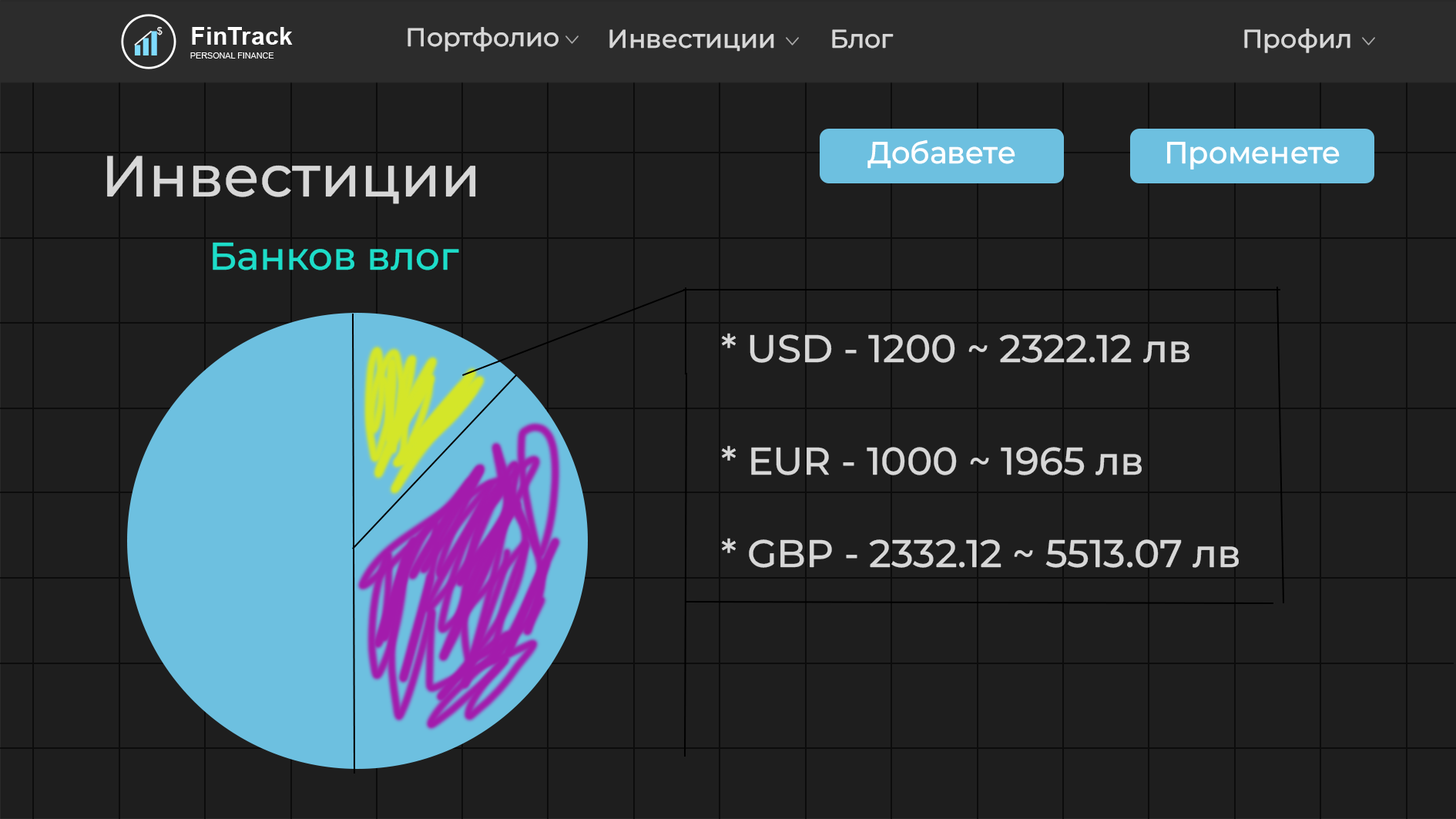
<style>
.page{position:relative;width:1456px;height:819px;background:#1e1e1e}
.page>*{position:absolute;margin:0}
.t1{font:25.7px "MontserratRoman-Medium";color:#d7d7d7}
.t2{font:30.6px "MontserratRoman-Medium";color:#ffffff;scale:0.97 1}
.t3{font:57.8px "MontserratRoman-Medium";color:#d7d7d7}
.t4{font:38.5px "MontserratRoman-Medium";color:#1dddc9}
.t5{font:38.5px "MontserratRoman-Medium";color:#d7d7d7}
</style>
<div class="page">
<p class="t1" style="left:408px;top:27px;width:151px;height:25px">Портфолио</p>
<p class="t1" style="left:609px;top:29px;width:165px;height:23px">Инвестиции</p>
<p class="t1" style="left:832px;top:29px;width:62px;height:20px">Блог</p>
<p class="t1" style="left:1244px;top:29px;width:107px;height:24px">Профил</p>
<p class="t2" style="left:867px;top:139px;width:148px;height:30px">Добавете</p>
<p class="t2" style="left:1167px;top:142px;width:173px;height:27px">Променете</p>
<p class="t3" style="left:107px;top:156px;width:369px;height:48px">Инвестиции</p>
<p class="t4" style="left:213px;top:242px;width:246px;height:28px">Банков влог</p>
<p class="t5" style="left:721px;top:333px;width:469px;height:30px">* USD - 1200 ~ 2322.12 лв</p>
<p class="t5" style="left:721px;top:445px;width:518px;height:123px">* ЕUR - 1000 ~ 1965 лв<br><br>* GBP - 2332.12 ~ 5513.07 лв</p>
</div>
